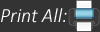
<style>
.page{position:relative;width:100px;height:32px;background:#333333}
.page>*{position:absolute;margin:0}
.t1{font:19.9px "Calibri-LightItalic";color:#ffffff}
</style>
<div class="page">
<p class="t1" style="left:1px;top:8px;width:66px;height:15px">Print All:</p>
</div>
